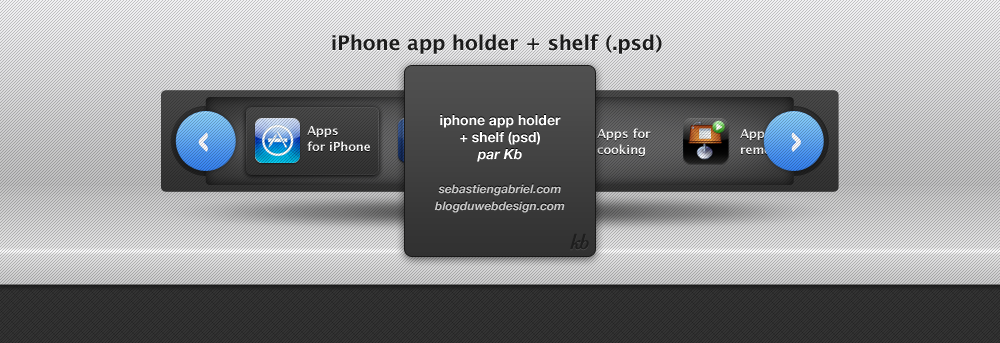
<style>
.page{position:relative;width:1000px;height:343px}
.page>*{position:absolute;margin:0}
.t1{font:20px "LucidaGrande-Bold";color:#1e1e1e}
.t2{font:12px/16px "LucidaGrande-Bold";color:#ffffff}
.t3{font:12px/17px "HelveticaNeue-BoldItalic";color:#c8c8c8}
.t4{font:14px/17px "HelveticaNeue-Bold";color:#ffffff}
.t5{font:14px/17px "HelveticaNeue-BoldItalic";color:#ffffff}
.t6{font:12px/16px "LucidaGrande-Bold"}
</style>
<div class="page">
<p class="t1" style="left:332px;top:34px;width:330px;height:20px">iPhone app holder + shelf (.psd)</p>
<p class="t2" style="left:307px;top:126px;width:63px;height:25px">Apps<br>for iPhone</p>
<p class="t3" style="left:434px;top:115px;width:131px;height:98px;text-align:center"><span class="t4">iphone app holder<br>+ shelf (psd)<br></span><span class="t5">par Kb<br><br></span>sebastiengabriel.com<br>blogduwebdesign.com</p>
<p class="t2" style="left:597px;top:128px;width:54px;height:29px">Apps for<br>cooking</p>
<p class="t6" style="left:740px;top:128px;width:54px;height:26px">Apps for<br>remote</p>
</div>
